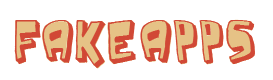
<style>
.page{position:relative;width:273px;height:80px;background:#ffffff}
.page>*{position:absolute;margin:0}
.t1{font:49px "BadWeekend";color:#d14836}
</style>
<div class="page">
<p class="t1" style="left:14px;top:20px;width:241px;height:48px">FAkeapps</p>
</div>
